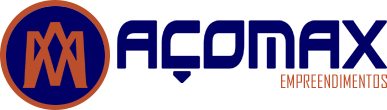
<style>
.page{position:relative;width:387px;height:110px;background:#ffffff}
.page>*{position:absolute;margin:0}
.t1{font:66.2px "Xirod-Regular";color:#010066;font-weight:bold;scale:0.63 1}
.t2{font:17.8px "AgencyFB-Reg";letter-spacing:0.007em;color:#c2512c;text-transform:uppercase}
</style>
<div class="page">
<p class="t1" style="left:117px;top:20px;width:270px;height:63px">AÇOMAX</p>
<p class="t2" style="left:281px;top:74px;width:106px;height:14px">empreendimentos</p>
</div>
